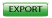
<style>
.page{position:relative;width:52px;height:18px;background:#ffffff}
.page>*{position:absolute;margin:0}
.t1{font:8.4px "MyriadPro-Regular";color:#000000;scale:1.21 1}
</style>
<div class="page">
<p class="t1" style="left:9px;top:6px;width:34px;height:6px">EXPORT</p>
</div>
